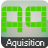
<style>
.page{position:relative;width:48px;height:48px}
.page>*{position:absolute;margin:0}
.t1{font:48px "Astronaut";color:#49d000}
.t2{font:9px "Small Fonts";color:#f3f3f3}
</style>
<div class="page">
<p class="t1" style="left:1px;top:6px;width:46px;height:27px">Aq</p>
<p class="t2" style="left:6px;top:39px;width:39px;height:9px">Aquisition</p>
</div>
